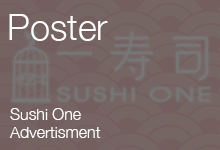
<style>
.page{position:relative;width:220px;height:150px}
.page>*{position:absolute;margin:0}
.t1{font:36px "HelveticaNeue-Light";color:#ffffff}
.t2{font:16px/18px "HelveticaNeue-Light";color:#ffffff}
</style>
<div class="page">
<p class="t1" style="left:9px;top:14px;width:99px;height:27px">Poster</p>
<p class="t2" style="left:9px;top:108px;width:92px;height:30px">Sushi One<br>Advertisment</p>
</div>
